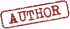
<style>
.page{position:relative;width:70px;height:29px;background:#ffffff}
.page>*{position:absolute;margin:0}
.t1{font:12.5px "MomsTypewriter";color:#913434}
</style>
<div class="page">
<p class="t1" style="left:9px;top:5px;width:52px;height:19px;rotate:-10deg">AUTHOR</p>
</div>
